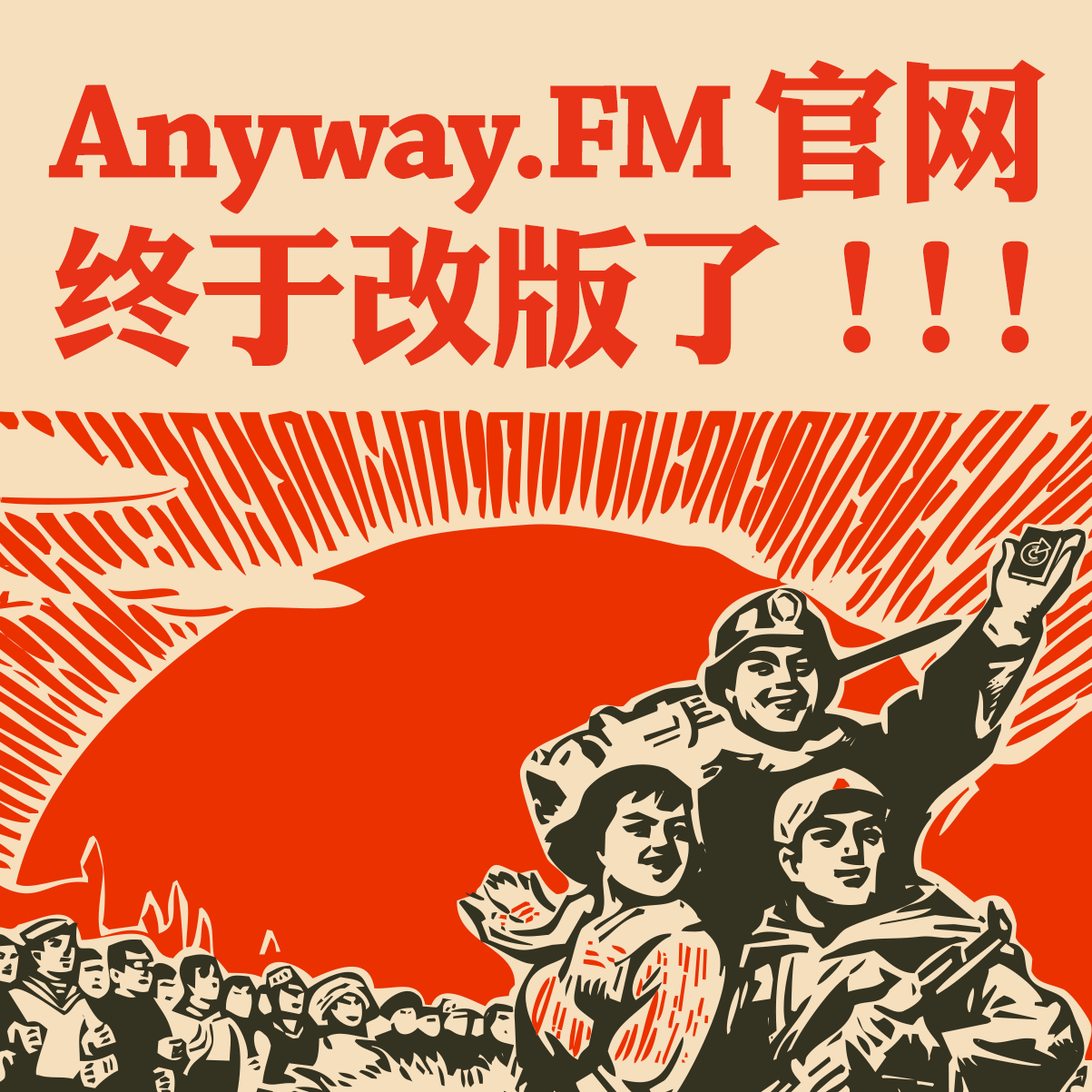
<style>
.page{position:relative;width:1092px;height:1092px;background:#eb3100}
.page>*{position:absolute;margin:0}
.t1{font:140.7px/164.4px "ChaparralPro-Bold";letter-spacing:-0.04em;color:#e83318}
.t2{font:152.1px/164.4px "DFLiJinHeiW8-GB5";letter-spacing:-0.04em;color:#e83318}
.t3{font:152.1px/164.4px "DFLiJinHeiW8-GB5";letter-spacing:-0.48em;color:#e83318}
</style>
<div class="page">
<p class="t1" style="left:48px;top:59px;width:998px;height:310px">Anyway.FM<span class="t2">官網<br>終於改版了</span><span class="t3">！！！</span></p>
</div>
